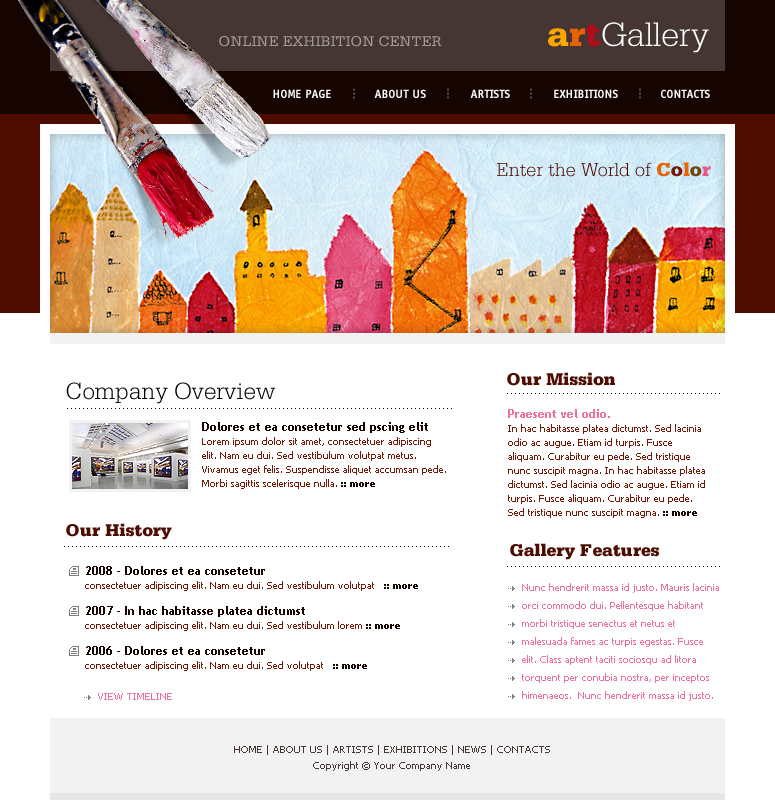
<style>
.page{position:relative;width:775px;height:800px;background:#ffffff}
.page>*{position:absolute;margin:0}
.t1{font:36px "SerifaStd-Light";color:#ffffff}
.t2{font:36px "SerifaStd-Black";color:#faa701}
.t3{font:36px "SerifaStd-Black";color:#ea6303}
.t4{font:36px "SerifaStd-Black";color:#b10c1b}
.t5{font:15px "SerifaStd-Roman";color:#a29b99;text-transform:uppercase}
.t6{font:12px "OffensiveBoldBold";color:#ffffff}
.t7{font:12px "OffensiveBoldBold";color:#5c504d}
.t8{font:19.9px "SerifaStd-Light";color:#4e0c00}
.t9{font:19.9px "SerifaStd-Black";color:#ea6303}
.t10{font:19.9px "SerifaStd-Black";color:#741907}
.t11{font:19.9px "SerifaStd-Black";color:#6d470f}
.t12{font:19.9px "SerifaStd-Black";color:#e75884}
.t13{font:18px "SerifaStd-Black";color:#4e0c00}
.t14{font:24.7px "SerifaStd-Light";color:#000000}
.t15{font:10px "TrebuchetMS-Bold";color:#000000}
.t16{font:10px/14px "Tahoma";color:#741907}
.t17{font:12px/12px "TrebuchetMS-Bold";color:#f1719a}
.t18{font:10px/14px "Tahoma-Bold";color:#160400}
.t19{font:12px/12px "TrebuchetMS-Bold";color:#160400}
.t20{font:10px/18px "Tahoma";color:#f1719a}
.t21{font:10px "Tahoma";color:#f1719a}
.t22{font:10px/16px "Tahoma";color:#453633}
</style>
<div class="page">
<p class="t1" style="left:548px;top:22px;width:161px;height:31px"><span class="t2">a</span><span class="t3">r</span><span class="t4">t</span>Gallery</p>
<p class="t5" style="left:219px;top:36px;width:223px;height:11px">online exhibition center</p>
<p class="t6" style="left:273px;top:89px;width:58px;height:9px">HOME PAGE</p>
<p class="t7" style="left:353px;top:88px;width:2px;height:11px;rotate:90deg">...</p>
<p class="t6" style="left:374px;top:89px;width:52px;height:9px">ABOUT US</p>
<p class="t7" style="left:447px;top:88px;width:2px;height:11px;rotate:90deg">...</p>
<p class="t6" style="left:470px;top:89px;width:40px;height:9px">ARTISTS</p>
<p class="t7" style="left:530px;top:88px;width:2px;height:11px;rotate:90deg">...</p>
<p class="t6" style="left:554px;top:89px;width:64px;height:9px">EXHIBITIONS</p>
<p class="t7" style="left:639px;top:88px;width:2px;height:11px;rotate:90deg">...</p>
<p class="t6" style="left:661px;top:89px;width:49px;height:9px">CONTACTS</p>
<p class="t8" style="left:497px;top:162px;width:214px;height:15px">Enter the World of <span class="t9">C</span><span class="t10">o</span><span class="t9">l</span><span class="t11">o</span><span class="t12">r</span></p>
<p class="t13" style="left:507px;top:372px;width:108px;height:14px">Our Mission</p>
<p class="t14" style="left:66px;top:382px;width:209px;height:22px">Company Overview</p>
<p class="t15" style="left:507px;top:393px;width:213px;height:1px">......................................................</p>
<p class="t15" style="left:67px;top:408px;width:385px;height:1px">.................................................................................................</p>
<p class="t16" style="left:508px;top:409px;width:197px;height:109px"><span class="t17">Praesent vel odio. <br></span>In hac habitasse platea dictumst. Sed lacinia odio ac augue. Etiam id turpis. Fusce aliquam. Curabitur eu pede. Sed tristique nunc suscipit magna. In hac habitasse platea dictumst. Sed lacinia odio ac augue. Etiam id turpis. Fusce aliquam. Curabitur eu pede. Sed tristique nunc suscipit magna. <span class="t18">:: more</span></p>
<p class="t16" style="left:202px;top:422px;width:244px;height:67px"><span class="t19">Dolores et ea consetetur sed pscing elit </span><br>Lorem ipsum dolor sit amet, consectetuer adipiscing elit. Nam eu dui. Sed vestibulum volutpat metus. Vivamus eget felis. Suspendisse aliquet accumsan pede. Morbi sagittis scelerisque nulla. <span class="t18">:: more</span></p>
<p class="t13" style="left:66px;top:523px;width:106px;height:17px">Our History</p>
<p class="t13" style="left:510px;top:543px;width:149px;height:17px">Gallery Features</p>
<p class="t15" style="left:64px;top:546px;width:385px;height:1px">.................................................................................................</p>
<p class="t16" style="left:85px;top:566px;width:333px;height:105px"><span class="t19">2008 - Dolores et ea consetetur </span><br>consectetuer adipiscing elit. Nam eu dui. Sed vestibulum volutpat   <span class="t18">:: more<br><br></span><span class="t19">2007 - In hac habitasse platea dictumst<br></span>consectetuer adipiscing elit. Nam eu dui. Sed vestibulum lorem <span class="t18">:: more<br><br></span><span class="t19">2006 - Dolores et ea consetetur </span><br>consectetuer adipiscing elit. Nam eu dui. Sed volutpat   <span class="t18">:: more</span></p>
<p class="t15" style="left:507px;top:566px;width:213px;height:1px">......................................................</p>
<p class="t20" style="left:522px;top:583px;width:197px;height:118px">Nunc hendrerit massa id justo. Mauris lacinia orci commodo dui. Pellentesque habitant morbi tristique senectus et netus et malesuada fames ac turpis egestas. Fusce elit. Class aptent taciti sociosqu ad litora torquent per conubia nostra, per inceptos himenaeos.  Nunc hendrerit massa id justo.</p>
<p class="t21" style="left:98px;top:693px;width:74px;height:7px">VIEW TIMELINE</p>
<p class="t22" style="left:234px;top:745px;width:316px;height:26px;text-align:center">HOME | ABOUT US | ARTISTS | EXHIBITIONS | NEWS | CONTACTS<br>Copyright © Your Company Name</p>
</div>
